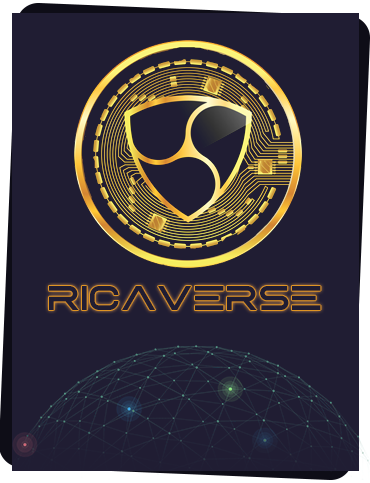
<style>
.page{position:relative;width:370px;height:483px;background:#201d33}
.page>*{position:absolute;margin:0}
.t1{font:40px "ArtemusRegular";color:#201d33}
</style>
<div class="page">
<p class="t1" style="left:49px;top:286px;width:272px;height:24px">Ricaverse</p>
</div>
